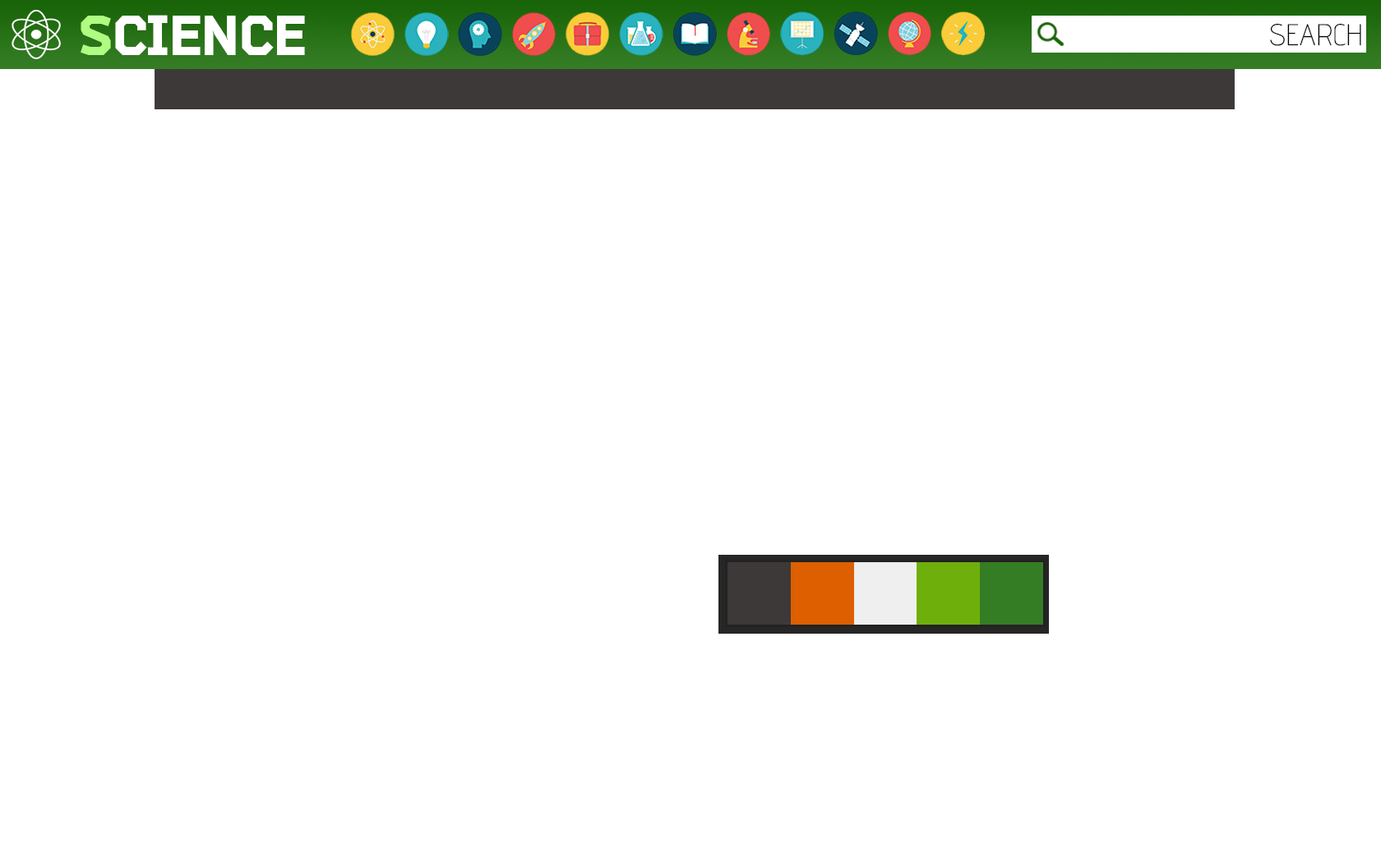
<style>
.page{position:relative;width:1381px;height:863px;background:#ffffff}
.page>*{position:absolute;margin:0}
.t1{font:56px "Bender-Black";color:#ffffff;text-transform:uppercase}
.t2{font:56px "Bender-Black";color:#b0fc82;text-transform:uppercase}
.t3{font:29.9px "AdventPro-ExtraLight";color:#000000;text-transform:uppercase}
</style>
<div class="page">
<p class="t1" style="left:81px;top:15px;width:224px;height:40px"><span class="t2">S</span>cience</p>
<p class="t3" style="left:1270px;top:23px;width:92px;height:23px">search</p>
</div>
